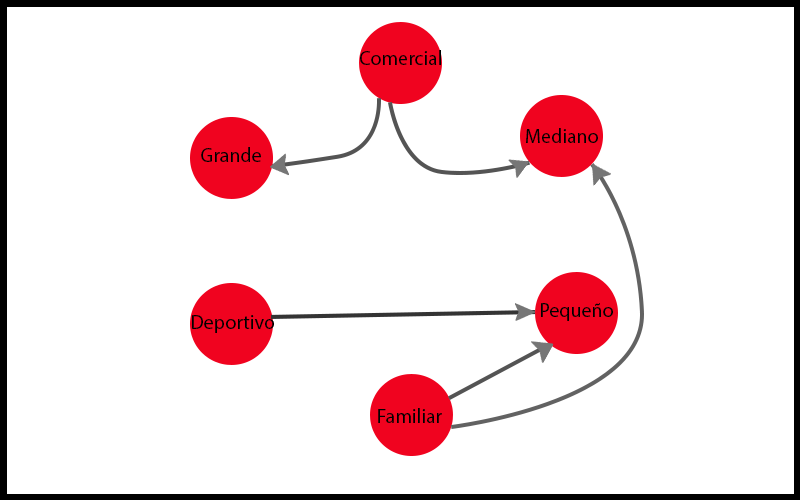
<style>
.page{position:relative;width:800px;height:500px;background:#ffffff}
.page>*{position:absolute;margin:0}
.t1{font:20px "MyriadPro-Regular";color:#000000}
</style>
<div class="page">
<p class="t1" style="left:360px;top:50px;width:81px;height:15px">Comercial</p>
<p class="t1" style="left:526px;top:128px;width:72px;height:15px">Mediano</p>
<p class="t1" style="left:201px;top:147px;width:60px;height:15px">Grande</p>
<p class="t1" style="left:541px;top:303px;width:72px;height:18px">Pequeño</p>
<p class="t1" style="left:192px;top:315px;width:82px;height:18px">Deportivo</p>
<p class="t1" style="left:378px;top:408px;width:64px;height:15px">Familiar</p>
</div>
